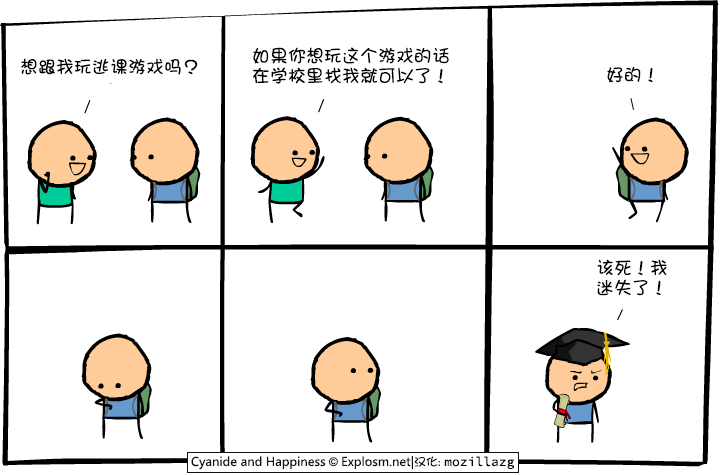
<style>
.page{position:relative;width:720px;height:475px;background:#ffffff}
.page>*{position:absolute;margin:0}
.t1{font:18px/20px "DFGirl";color:#000000}
.t2{font:18px "DFGirl";color:#000000}
</style>
<div class="page">
<p class="t1" style="left:253px;top:47px;width:196px;height:37px">如果你想玩这个游戏的话<br>在学校里找我就可以了！</p>
<p class="t2" style="left:21px;top:58px;width:177px;height:17px">想跟我玩逃课游戏吗？</p>
<p class="t2" style="left:607px;top:66px;width:46px;height:17px">好的！</p>
<p class="t1" style="left:597px;top:259px;width:70px;height:37px">该死！我<br>迷失了！</p>
</div>
